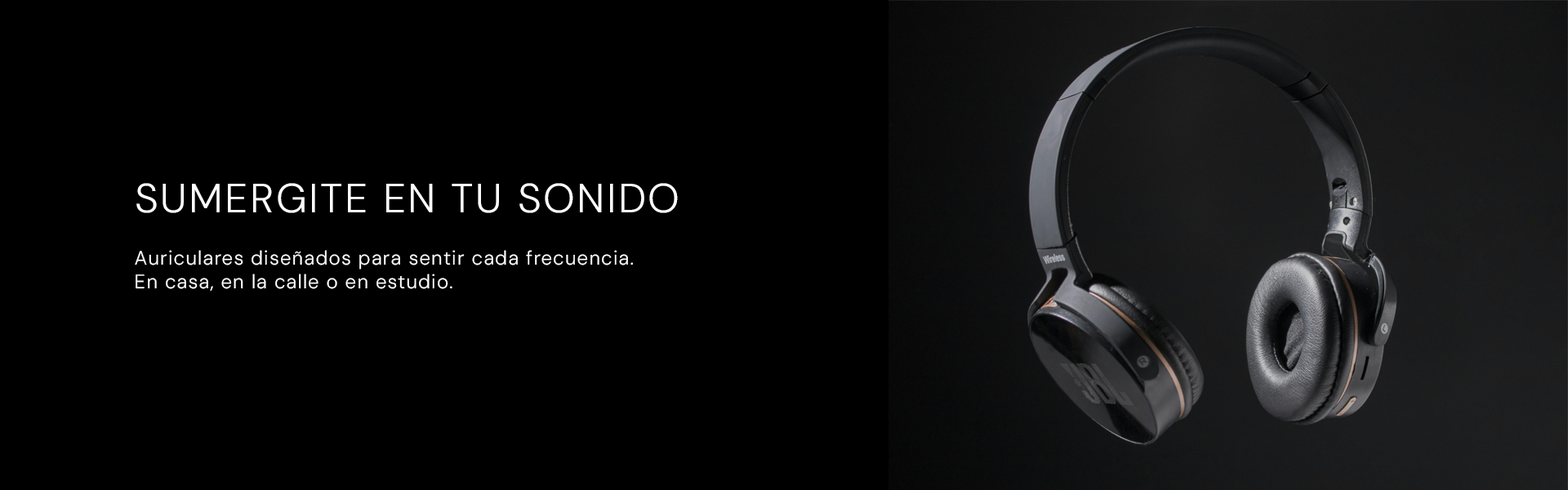
<style>
.page{position:relative;width:1568px;height:490px;background:#000000}
.page>*{position:absolute;margin:0}
.t1{font:40.8px "DMSans-Light";letter-spacing:0.05em;color:#ffffff}
.t2{font:19.6px "DMSans-Light";letter-spacing:0.05em;color:#ffffff}
</style>
<div class="page">
<p class="t1" style="left:136px;top:183px;width:542px;height:30px">SUMERGITE EN TU SONIDO</p>
<p class="t2" style="left:135px;top:250px;width:498px;height:41px">Auriculares diseñados para sentir cada frecuencia.<br>En casa, en la calle o en estudio.</p>
</div>
